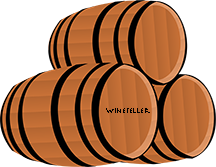
<style>
.page{position:relative;width:216px;height:167px;background:#ffffff}
.page>*{position:absolute;margin:0}
.t1{font:7.7px "Herculanum";color:#000000}
</style>
<div class="page">
<p class="t1" style="left:106px;top:108px;width:44px;height:5px">Wineseller</p>
</div>
